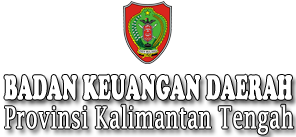
<style>
.page{position:relative;width:296px;height:137px;background:#ffffff}
.page>*{position:absolute;margin:0}
.t1{font:33.1px "CooperBlackStd";color:#ffffff;font-weight:bold;scale:0.51 1}
.t2{font:30.1px "LucidaFax";color:#ffffff;font-weight:bold;scale:0.64 1}
</style>
<div class="page">
<p class="t1" style="left:4px;top:74px;width:288px;height:26px">BADAN KEUANGAN DAERAH</p>
<p class="t2" style="left:5px;top:104px;width:289px;height:31px">Provinsi Kalimantan Tengah</p>
</div>
